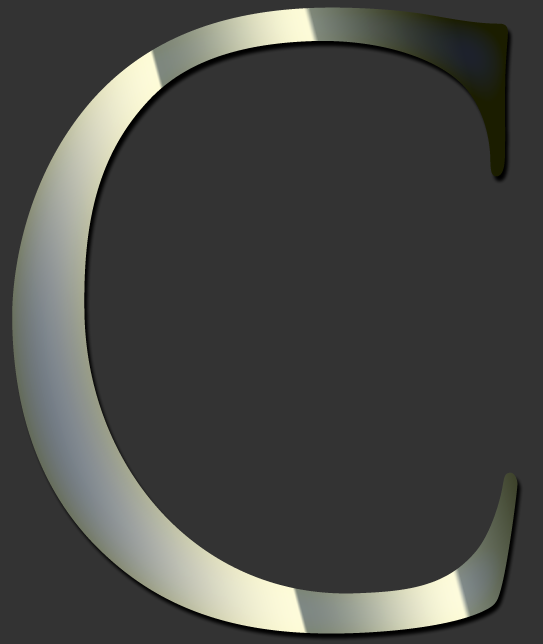
<style>
.page{position:relative;width:543px;height:644px;background:#333333}
.page>*{position:absolute;margin:0}
.t1{font:939.9px "TrajanPro-Regular";letter-spacing:-0.15em;scale:0.89 1}
</style>
<div class="page">
<p class="t1" style="left:12px;top:7px;width:506px;height:627px;rotate:-2deg">c</p>
</div>
